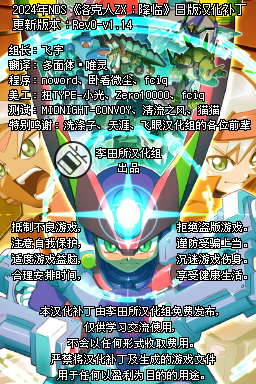
<style>
.page{position:relative;width:256px;height:384px}
.page>*{position:absolute;margin:0}
.t1{font:12px "Zfull-GB";color:#ffffff}
.t2{font:11px/15px "Zfull-GB";color:#ffffff}
.t3{font:11px/16px "Zfull-GB";color:#ffffff}
</style>
<div class="page">
<p class="t1" style="left:13px;top:4px;width:233px;height:11px">2024年NDS《洛克人ZX：降临》日版汉化补丁</p>
<p class="t1" style="left:13px;top:19px;width:119px;height:11px">更新版本：Rev0-v1.14</p>
<p class="t2" style="left:9px;top:45px;width:241px;height:85px">组长：飞宇<br>翻译：多面体·唯灵<br>程序：noword、卧看微尘、fciq<br>美工：扭TYPE-小光、Zero10000、fciq<br>测试：MIDNIGHT-CONVOY、清流之风、猫猫<br>特别鸣谢：洗涤子、天涯、飞眼汉化组的各位前辈</p>
<p class="t2" style="left:96px;top:148px;width:65px;height:25px;text-align:center">李田所汉化组<br>出品</p>
<p class="t3" style="left:12px;top:222px;width:235px;height:58px;text-align:center">抵制不良游戏，　　　　　　　　拒绝盗版游戏。<br>注意自我保护，　　　　　　　　谨防受骗上当。<br>适度游戏益脑，　　　　　　　　沉迷游戏伤身。<br>合理安排时间，　　　　　　　　享受健康生活。</p>
<p class="t3" style="left:40px;top:306px;width:178px;height:74px;text-align:center">本汉化补丁由李田所汉化组免费发布，<br>仅供学习交流使用，<br>不会以任何形式收取费用。<br>严禁将汉化补丁及生成的游戏文件<br>用于任何以盈利为目的的用途。</p>
</div>
